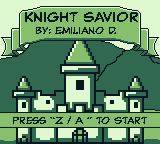
<style>
.page{position:relative;width:160px;height:144px;background:#306850}
.page>*{position:absolute;margin:0}
.t1{font:10px "ClassicComic";color:#071821}
.t2{font:14px "ClassicComic";color:#071821}
</style>
<div class="page">
<p class="t1" style="left:25px;top:12px;width:113px;height:22px"><span class="t2">Knight Savior<br></span>   by: Emiliano D.</p>
<p class="t1" style="left:13px;top:116px;width:134px;height:8px">Press “Z / A ” to Start</p>
</div>
